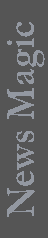
<style>
.page{position:relative;width:48px;height:238px;background:#555555}
.page>*{position:absolute;margin:0}
.t1{font:42.1px "Garamond-Bold";color:#9398a1;scale:0.87 1}
</style>
<div class="page">
<p class="t1" style="left:7px;top:22px;width:38px;height:195px;rotate:-90deg">News Magic</p>
</div>
